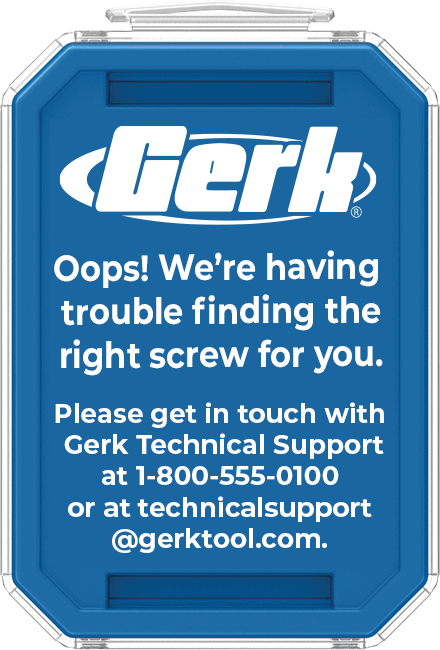
<style>
.page{position:relative;width:440px;height:650px;background:#1966a0}
.page>*{position:absolute;margin:0}
.t1{font:36.3px "Montserrat-Bold";color:#ffffff;scale:0.88 1}
.t2{font:26.1px "Montserrat-Bold";color:#ffffff}
</style>
<div class="page">
<p class="t1" style="left:54px;top:250px;width:329px;height:126px;text-align:center">Oops! We’re having<br> trouble finding the<br> right screw for you.</p>
<p class="t2" style="left:55px;top:402px;width:329px;height:151px;text-align:center">Please get in touch with<br> Gerk Technical Support<br>at 1-800-555-0100<br>or at technicalsupport<br>@gerktool.com.</p>
</div>
